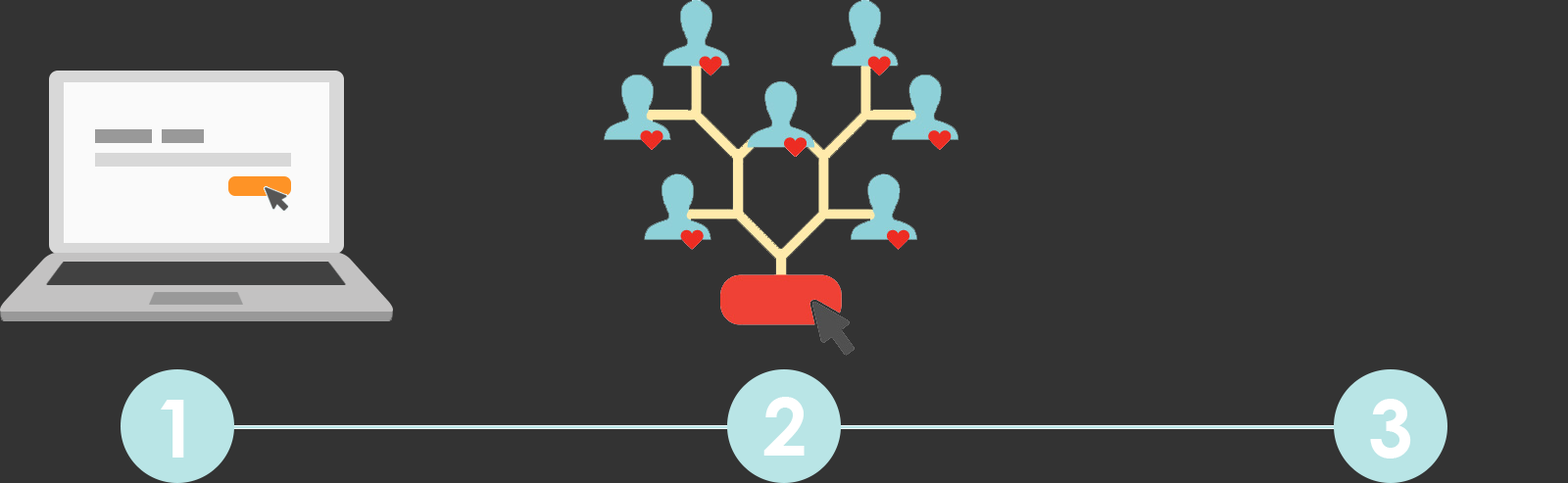
<style>
.page{position:relative;width:1568px;height:483px;background:#333333}
.page>*{position:absolute;margin:0}
.t1{font:80.4px "CenturyGothic-Bold";color:#ffffff}
</style>
<div class="page">
<p class="t1" style="left:763px;top:397px;width:42px;height:59px">2</p>
<p class="t1" style="left:1370px;top:399px;width:41px;height:60px">3</p>
</div>
